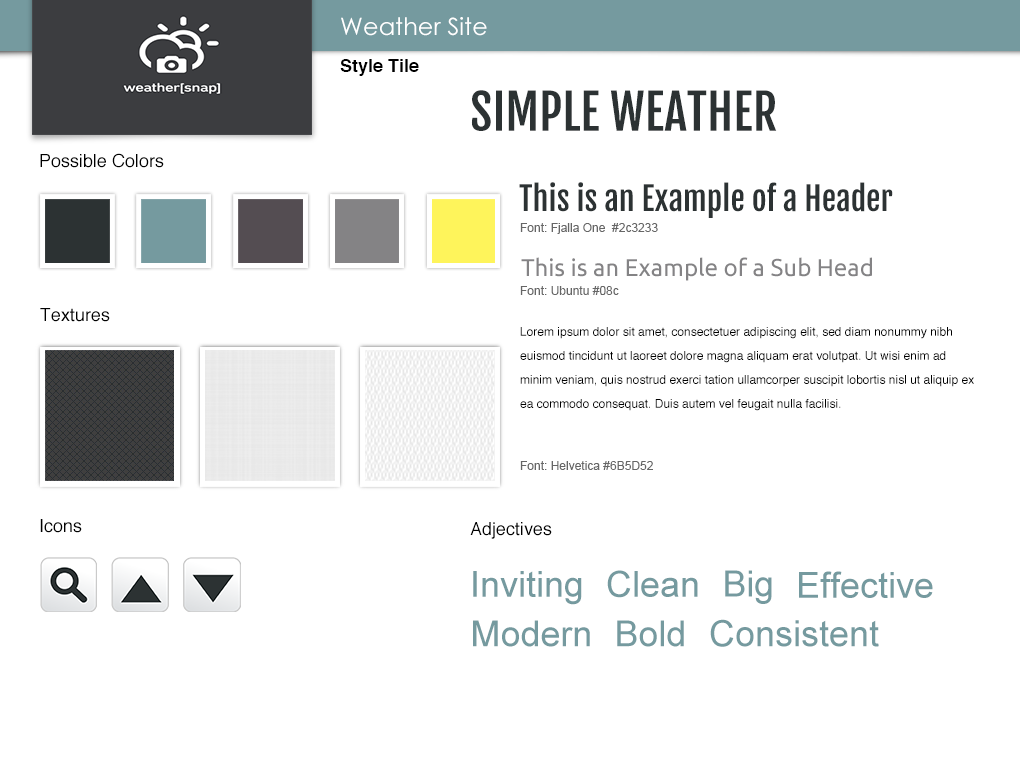
<style>
.page{position:relative;width:1020px;height:760px;background:#ffffff}
.page>*{position:absolute;margin:0}
.t1{font:24px "CenturyGothic";color:#ffffff}
.t2{font:18px "Helvetica-Bold";color:#000000}
.t3{font:48px "FjallaOne-Regular";color:#2c3233}
.t4{font:18px "Helvetica";color:#000000}
.t5{font:32px "FjallaOne-Regular";color:#2c3233}
.t6{font:12px "ArialMT";color:#666666}
.t7{font:24px "Ubuntu";color:#848385}
.t8{font:12px/24px "Helvetica";color:#000000}
.t9{font:36px "ArialMT";color:#759a9f}
.t10{font:36.4px "ArialMT";color:#759a9f}
.t11{font:35.9px "ArialMT";color:#759a9f}
</style>
<div class="page">
<p class="t1" style="left:341px;top:17px;width:146px;height:19px">Weather Site</p>
<p class="t2" style="left:340px;top:59px;width:79px;height:17px">Style Tile</p>
<p class="t3" style="left:471px;top:90px;width:306px;height:41px">SIMPLE WEATHER</p>
<p class="t4" style="left:40px;top:153px;width:124px;height:15px">Possible Colors</p>
<p class="t5" style="left:519px;top:182px;width:374px;height:36px">This is an Example of a Header</p>
<p class="t6" style="left:520px;top:223px;width:138px;height:11px">Font: Fjalla One  #2c3233</p>
<p class="t7" style="left:521px;top:257px;width:351px;height:24px">This is an Example of a Sub Head</p>
<p class="t6" style="left:520px;top:286px;width:99px;height:9px">Font: Ubuntu #08c</p>
<p class="t4" style="left:40px;top:308px;width:70px;height:14px">Textures</p>
<p class="t8" style="left:520px;top:327px;width:454px;height:84px">Lorem ipsum dolor sit amet, consectetuer adipiscing elit, sed diam nonummy nibh euismod tincidunt ut laoreet dolore magna aliquam erat volutpat. Ut wisi enim ad minim veniam, quis nostrud exerci tation ullamcorper suscipit lobortis nisl ut aliquip ex ea commodo consequat. Duis autem vel feugait nulla facilisi.</p>
<p class="t6" style="left:520px;top:461px;width:133px;height:9px">Font: Helvetica #6B5D52</p>
<p class="t4" style="left:40px;top:519px;width:42px;height:14px">Icons</p>
<p class="t4" style="left:470px;top:522px;width:82px;height:17px">Adjectives</p>
<p class="t9" style="left:473px;top:571px;width:109px;height:34px">Inviting</p>
<p class="t9" style="left:607px;top:570px;width:91px;height:28px">Clean</p>
<p class="t10" style="left:725px;top:570px;width:47px;height:34px">Big</p>
<p class="t11" style="left:799px;top:571px;width:134px;height:27px">Effective</p>
<p class="t11" style="left:473px;top:620px;width:117px;height:27px">Modern</p>
<p class="t11" style="left:617px;top:620px;width:67px;height:27px">Bold</p>
<p class="t10" style="left:710px;top:619px;width:169px;height:28px">Consistent</p>
</div>
